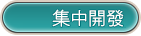
<style>
.page{position:relative;width:141px;height:36px}
.page>*{position:absolute;margin:0}
.t1{font:18px "GothicMB101Pr6N-Light";color:#fffffd}
</style>
<div class="page">
<p class="t1" style="left:52px;top:9px;width:72px;height:18px">集中開發</p>
</div>
